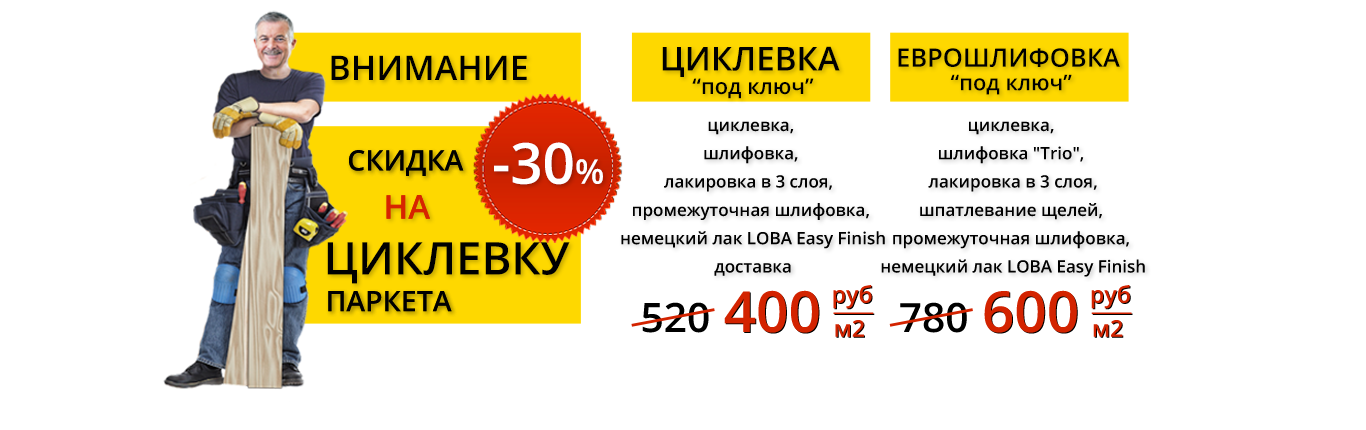
<style>
.page{position:relative;width:1366px;height:430px;background:#ffffff}
.page>*{position:absolute;margin:0}
.t1{font:21.7px/8.5px "OpenSans-Semibold";color:#000000}
.t2{font:33.1px/8.5px "OpenSans-Semibold";color:#000000}
.t3{font:25.5px/8.5px "OpenSans-Semibold";color:#000000}
.t4{font:34px "OpenSans-Semibold";color:#000000}
.t5{font:17px/13.2px "OpenSans-Semibold";color:#000000}
.t6{font:28.3px "OpenSans-Semibold";color:#000000}
.t7{font:56.7px "OpenSans-Semibold";color:#ffffff}
.t8{font:34px "OpenSans-Semibold";color:#ffffff}
.t9{font:33.1px "OpenSans-Semibold";color:#dc2400}
.t10{font:33.1px "OpenSans-Semibold";color:#d72300}
.t11{font:45.3px "OpenSans-Semibold";color:#000000}
.t12{font:56.7px "OpenSans-Semibold";color:#d32300}
.t13{font:39.7px "OpenSans-Semibold";color:#d32300}
.t14{font:40.6px "OpenSans-Semibold";color:#000000}
.t15{font:39.7px/11.3px "OpenSans-Semibold";color:#d32300}
</style>
<div class="page">
<p class="t1" style="left:662px;top:46px;width:178px;height:53px;text-align:center"><span class="t2">ЦИКЛЕВКА <br></span>“под ключ”</p>
<p class="t3" style="left:898px;top:48px;width:222px;height:47px;text-align:center">ЕВРОШЛИФОВКА <br><span class="t1">“под ключ”</span></p>
<p class="t4" style="left:331px;top:55px;width:196px;height:25px">ВНИМАНИЕ</p>
<p class="t5" style="left:621px;top:121px;width:264px;height:155px;text-align:center">циклевка, <br>шлифовка, <br>лакировка в 3 слоя,  <br>промежуточная шлифовка, <br>немецкий лак LOBA Easy Finish<br>доставка</p>
<p class="t5" style="left:881px;top:121px;width:264px;height:156px;text-align:center">циклевка, <br>шлифовка "Trio", <br>лакировка в 3 слоя,<br>шпатлевание щелей, <br>промежуточная шлифовка, <br>немецкий лак LOBA Easy Finish</p>
<p class="t6" style="left:349px;top:150px;width:115px;height:26px">СКИДКА</p>
<p class="t6" style="left:349px;top:150px;width:115px;height:26px">СКИДКА</p>
<p class="t7" style="left:494px;top:142px;width:109px;height:43px">-30<span class="t8">%</span></p>
<p class="t9" style="left:386px;top:195px;width:44px;height:24px">НА</p>
<p class="t10" style="left:386px;top:195px;width:44px;height:24px">НА</p>
<p class="t11" style="left:327px;top:242px;width:243px;height:42px">ЦИКЛЕВКУ</p>
<p class="t6" style="left:328px;top:291px;width:124px;height:21px">ПАРКЕТА</p>
<p class="t6" style="left:328px;top:291px;width:124px;height:21px">ПАРКЕТА</p>
<p class="t12" style="left:724px;top:290px;width:95px;height:43px">400</p>
<p class="t13" style="left:833px;top:285px;width:39px;height:24px">руб</p>
<p class="t12" style="left:984px;top:290px;width:93px;height:43px">600</p>
<p class="t13" style="left:1091px;top:285px;width:39px;height:24px">руб</p>
<p class="t14" style="left:642px;top:302px;width:67px;height:31px">520</p>
<p class="t14" style="left:900px;top:302px;width:67px;height:31px">780</p>
<p class="t15" style="left:833px;top:312px;width:41px;height:25px">____<br>м2</p>
<p class="t15" style="left:1091px;top:312px;width:41px;height:25px">____<br>м2</p>
</div>
